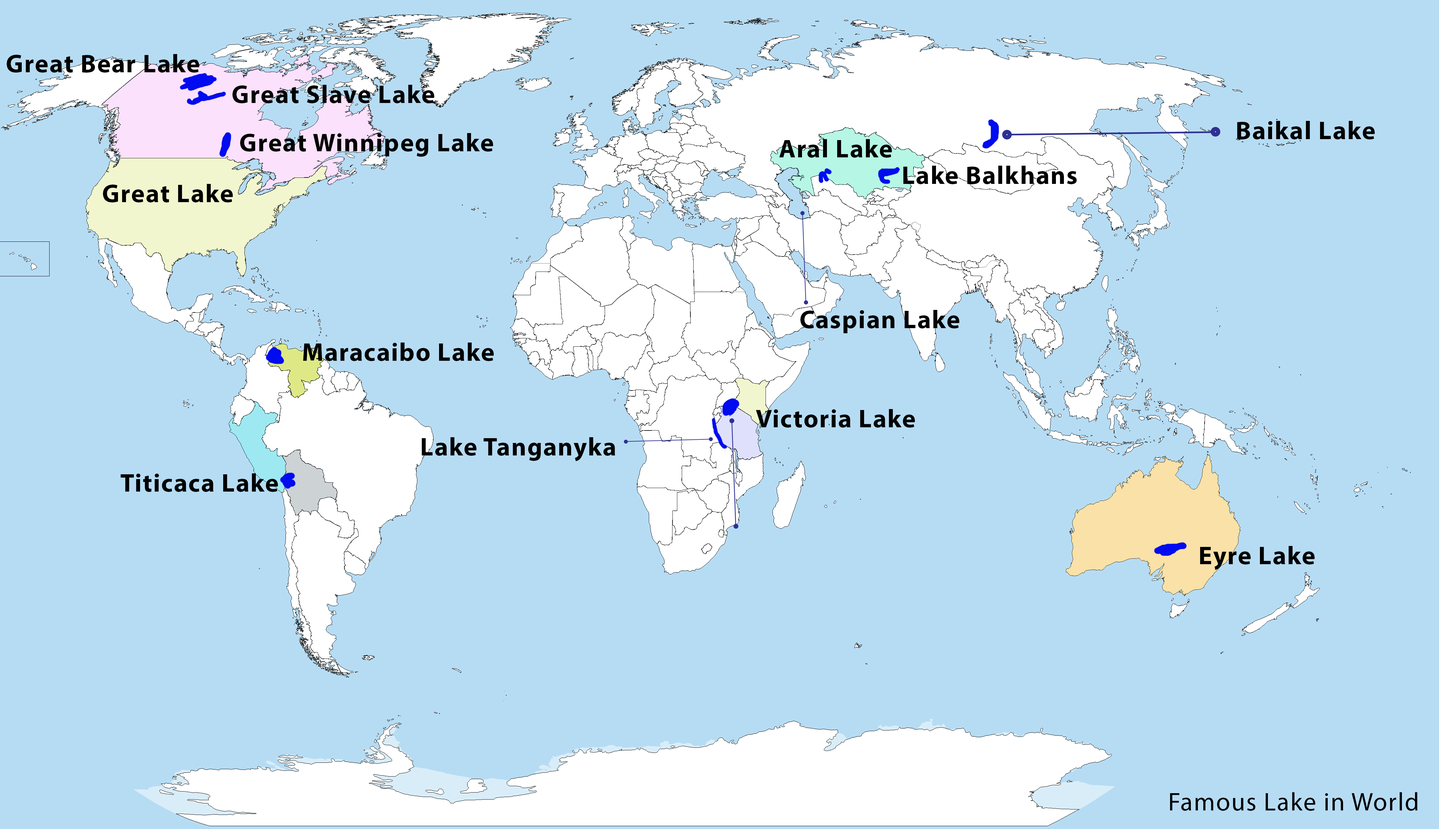
<style>
.page{position:relative;width:1439px;height:829px;background:#b6dcf4}
.page>*{position:absolute;margin:0}
.t1{font:25.6px "MyriadHebrew-Bold";letter-spacing:0.04em;color:#020202}
.t2{font:25.6px "MyriadHebrew-Bold";letter-spacing:0.04em;color:#000000}
.t3{font:25.6px "MyriadHebrew-Regular";letter-spacing:0.04em;color:#000000}
</style>
<div class="page">
<p class="t1" style="left:7px;top:54px;width:192px;height:19px">Great Bear Lake</p>
<p class="t1" style="left:232px;top:85px;width:202px;height:18px">Great Slave Lake</p>
<p class="t1" style="left:1237px;top:121px;width:138px;height:18px">Baikal Lake</p>
<p class="t1" style="left:240px;top:133px;width:253px;height:24px">Great Winnipeg Lake</p>
<p class="t2" style="left:779px;top:139px;width:113px;height:19px">Aral Lake</p>
<p class="t2" style="left:903px;top:166px;width:174px;height:18px">Lake Balkhans</p>
<p class="t1" style="left:103px;top:184px;width:130px;height:18px">Great Lake</p>
<p class="t1" style="left:800px;top:310px;width:159px;height:23px">Caspian Lake</p>
<p class="t2" style="left:303px;top:342px;width:191px;height:19px">Maracaibo Lake</p>
<p class="t1" style="left:756px;top:409px;width:159px;height:18px">Victoria Lake</p>
<p class="t1" style="left:422px;top:437px;width:193px;height:24px">Lake Tanganyka</p>
<p class="t2" style="left:121px;top:473px;width:157px;height:19px">Titicaca Lake</p>
<p class="t2" style="left:1200px;top:546px;width:114px;height:24px">Eyre Lake</p>
<p class="t3" style="left:1170px;top:792px;width:247px;height:19px">Famous Lake in World</p>
</div>
